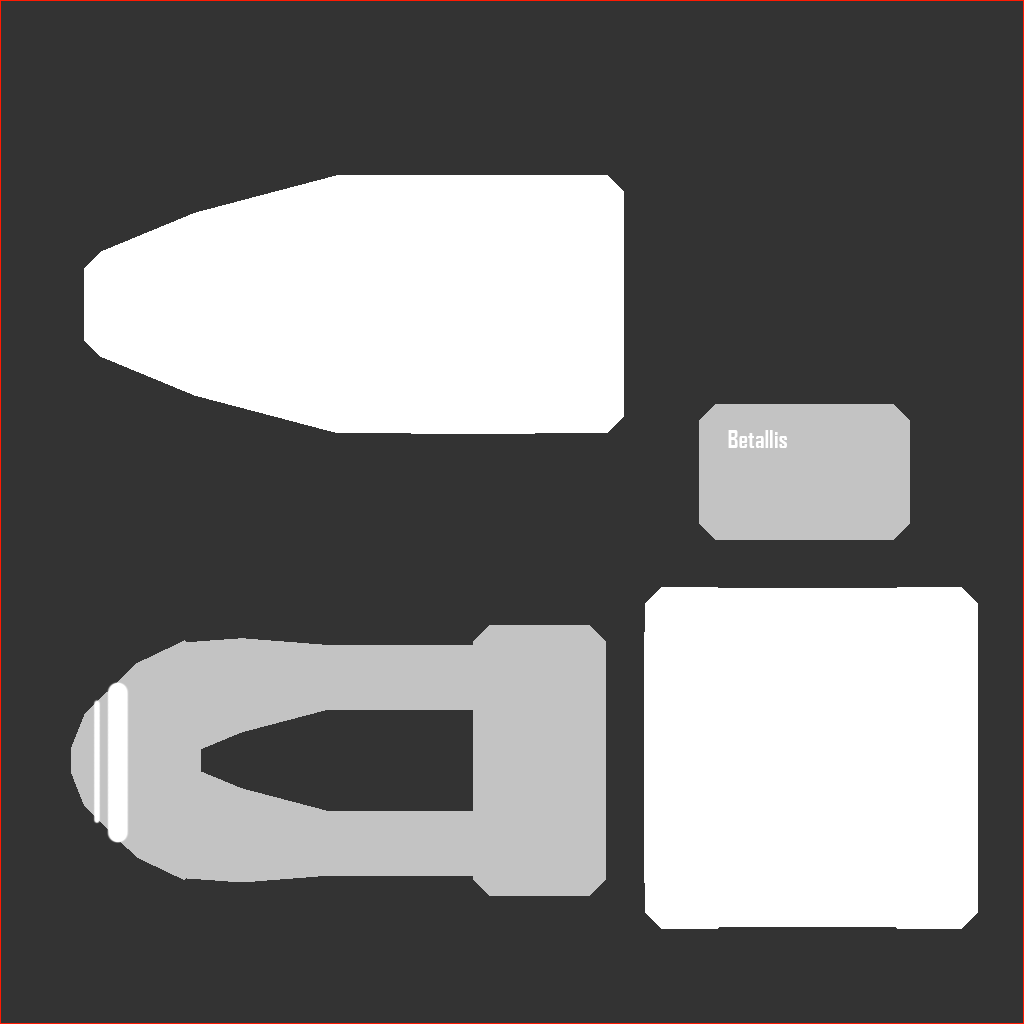
<style>
.page{position:relative;width:1024px;height:1024px;background:#333333}
.page>*{position:absolute;margin:0}
.t1{font:24px "AgencyFB-Bold";color:#ffffff}
</style>
<div class="page">
<p class="t1" style="left:728px;top:430px;width:59px;height:18px">Betallis</p>
</div>
